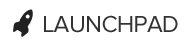
<style>
.page{position:relative;width:190px;height:48px;background:#ffffff}
.page>*{position:absolute;margin:0}
.t1{font:24px "ProximaNova-Regular";letter-spacing:-0.025em;color:#333333;text-transform:uppercase}
</style>
<div class="page">
<p class="t1" style="left:44px;top:15px;width:134px;height:18px">LaunchPad</p>
</div>
